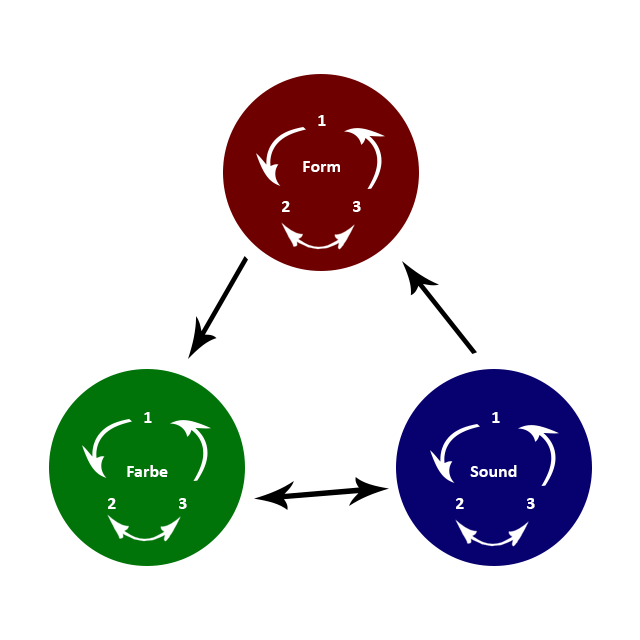
<style>
.page{position:relative;width:640px;height:640px;background:#ffffff}
.page>*{position:absolute;margin:0}
.t1{font:18px "Calibri-Bold";color:#ffffff}
</style>
<div class="page">
<p class="t1" style="left:318px;top:115px;width:8px;height:11px">1</p>
<p class="t1" style="left:303px;top:161px;width:37px;height:11px">Form</p>
<p class="t1" style="left:282px;top:201px;width:8px;height:11px">2</p>
<p class="t1" style="left:353px;top:201px;width:8px;height:11px">3</p>
<p class="t1" style="left:144px;top:412px;width:8px;height:11px">1</p>
<p class="t1" style="left:492px;top:412px;width:8px;height:11px">1</p>
<p class="t1" style="left:127px;top:465px;width:41px;height:12px">Farbe</p>
<p class="t1" style="left:470px;top:465px;width:47px;height:12px">Sound</p>
<p class="t1" style="left:108px;top:498px;width:8px;height:11px">2</p>
<p class="t1" style="left:179px;top:498px;width:8px;height:11px">3</p>
<p class="t1" style="left:456px;top:498px;width:8px;height:11px">2</p>
<p class="t1" style="left:527px;top:498px;width:8px;height:11px">3</p>
</div>
